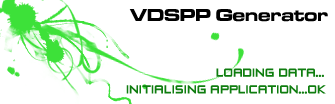
<style>
.page{position:relative;width:335px;height:104px;background:#ffffff}
.page>*{position:absolute;margin:0}
.t1{font:18px "MicrogrammaD-BoldExte";color:#000000}
.t2{font:14px "ZeroTwos";color:#0f7d0f}
</style>
<div class="page">
<p class="t1" style="left:129px;top:9px;width:199px;height:13px">VDSPP Generator</p>
<p class="t2" style="left:126px;top:68px;width:200px;height:26px;text-align:right">LOADING DATA...  <br>INITIALISING APPLICATION...OK</p>
</div>
